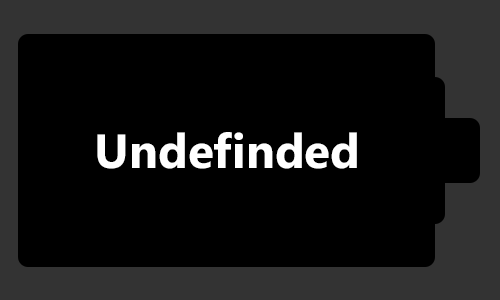
<style>
.page{position:relative;width:500px;height:300px;background:#000000}
.page>*{position:absolute;margin:0}
.t1{font:48px "MicrosoftTaiLe-Bold";color:#ffffff}
</style>
<div class="page">
<p class="t1" style="left:97px;top:132px;width:260px;height:37px">Undefinded</p>
</div>
